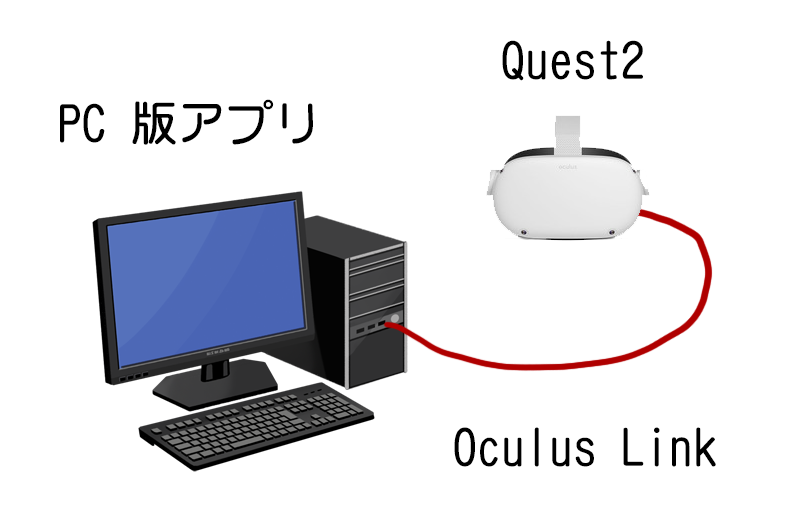
<style>
.page{position:relative;width:800px;height:532px;background:#ffffff}
.page>*{position:absolute;margin:0}
.t1{font:47.8px "FA-RoundGothicBS";color:#000000}
</style>
<div class="page">
<p class="t1" style="left:502px;top:40px;width:141px;height:41px">Quest2</p>
<p class="t1" style="left:60px;top:99px;width:253px;height:46px">PC 版アプリ</p>
<p class="t1" style="left:454px;top:427px;width:262px;height:40px">Oculus Link</p>
</div>
